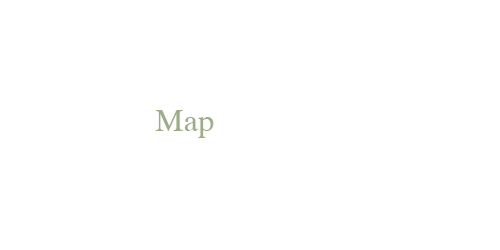
<style>
.page{position:relative;width:500px;height:250px;background:#ffffff}
.page>*{position:absolute;margin:0}
.t1{font:30px "Dutch801BT-Roman";color:#9dad87}
</style>
<div class="page">
<p class="t1" style="left:155px;top:110px;width:59px;height:28px">Map</p>
</div>
